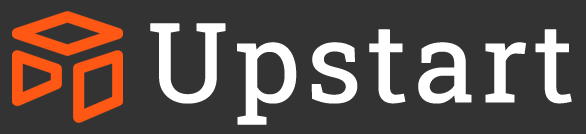
<style>
.page{position:relative;width:586px;height:134px;background:#333333}
.page>*{position:absolute;margin:0}
.t1{font:110px "RobotoSlab-Regular";letter-spacing:0.035em;color:#ffffff;font-weight:bold}
</style>
<div class="page">
<p class="t1" style="left:150px;top:23px;width:422px;height:102px">Upstart</p>
</div>
